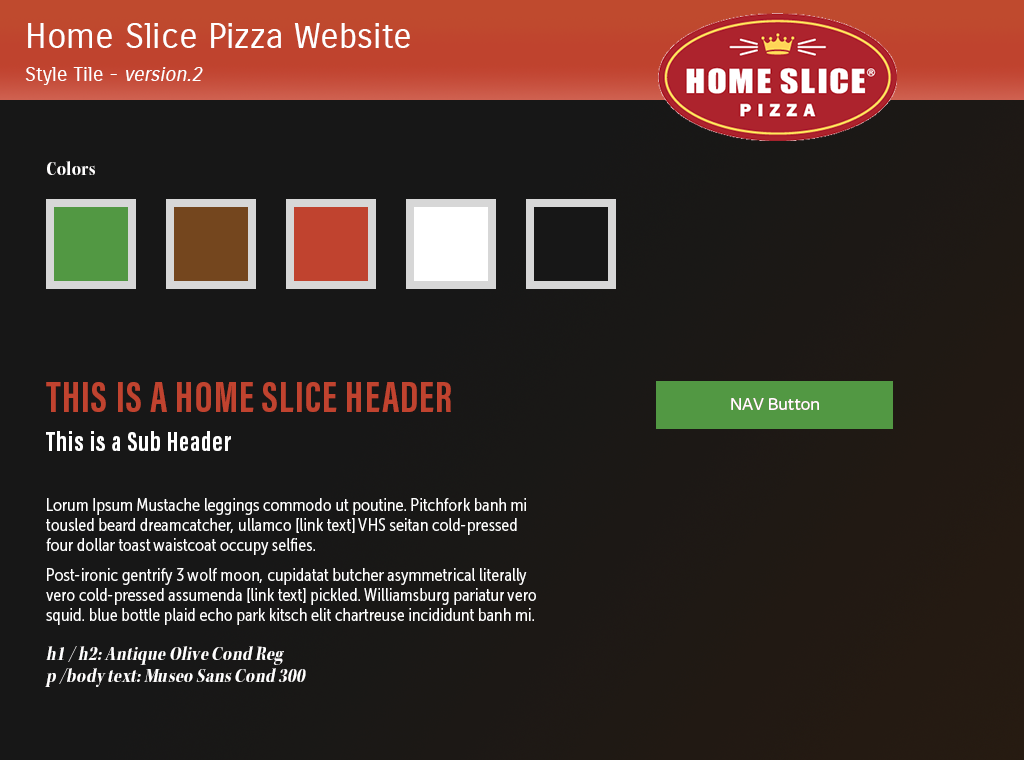
<style>
.page{position:relative;width:1024px;height:760px;background:#171717}
.page>*{position:absolute;margin:0}
.t1{font:35px "CarroisGothic-Regular";color:#ffffff}
.t2{font:20px "CarroisGothic-Regular";color:#ffffff}
.t3{font:20px "CarroisGothic-Regular";color:#ffffff;font-style:italic}
.t4{font:20px "KeplerStd-BoldScnDisp";letter-spacing:0.02em;color:#fffefe}
.t5{font:45px "AcuminProExtraCond-Bold";letter-spacing:0.03em;color:#c0432f;text-transform:uppercase}
.t6{font:17px "TisaSansPro";color:#ffffff}
.t7{font:17px "TisaSansPro";color:#fefefe}
.t8{font:28px "AcuminProExtraCond-Bold";letter-spacing:0.04em;color:#ffffff}
.t9{font:18px/20px "MuseoSansCond-300";letter-spacing:0.005em;color:#ffffff}
.t10{font:20px/22px "KeplerStd-BoldScnDisp";letter-spacing:0.02em;color:#fffefe;font-style:italic}
</style>
<div class="page">
<p class="t1" style="left:28px;top:23px;width:382px;height:25px">Home Slice Pizza Website</p>
<p class="t2" style="left:25px;top:67px;width:178px;height:18px">Style Tile - <span class="t3">version.2</span></p>
<p class="t4" style="left:47px;top:161px;width:48px;height:14px">Colors</p>
<p class="t5" style="left:46px;top:382px;width:405px;height:30px">This is a Home Slice Header</p>
<p class="t6" style="left:731px;top:398px;width:88px;height:12px">NAV Button</p>
<p class="t6" style="left:731px;top:398px;width:88px;height:12px">NAV Button</p>
<p class="t7" style="left:731px;top:398px;width:88px;height:12px">NAV Button</p>
<p class="t8" style="left:46px;top:431px;width:185px;height:20px">This is a Sub Header</p>
<p class="t9" style="left:46px;top:498px;width:490px;height:127px">Lorum Ipsum Mustache leggings commodo ut poutine. Pitchfork banh mi tousled beard dreamcatcher, ullamco [link text] VHS seitan cold-pressed four dollar toast waistcoat occupy selfies.<br>Post-ironic gentrify 3 wolf moon, cupidatat butcher asymmetrical literally vero cold-pressed assumenda [link text] pickled. Williamsburg pariatur vero squid. blue bottle plaid echo park kitsch elit chartreuse incididunt banh mi.</p>
<p class="t10" style="left:45px;top:646px;width:261px;height:41px">h1 / h2: Antique Olive Cond Reg<br>p /body text: Museo Sans Cond 300</p>
</div>
